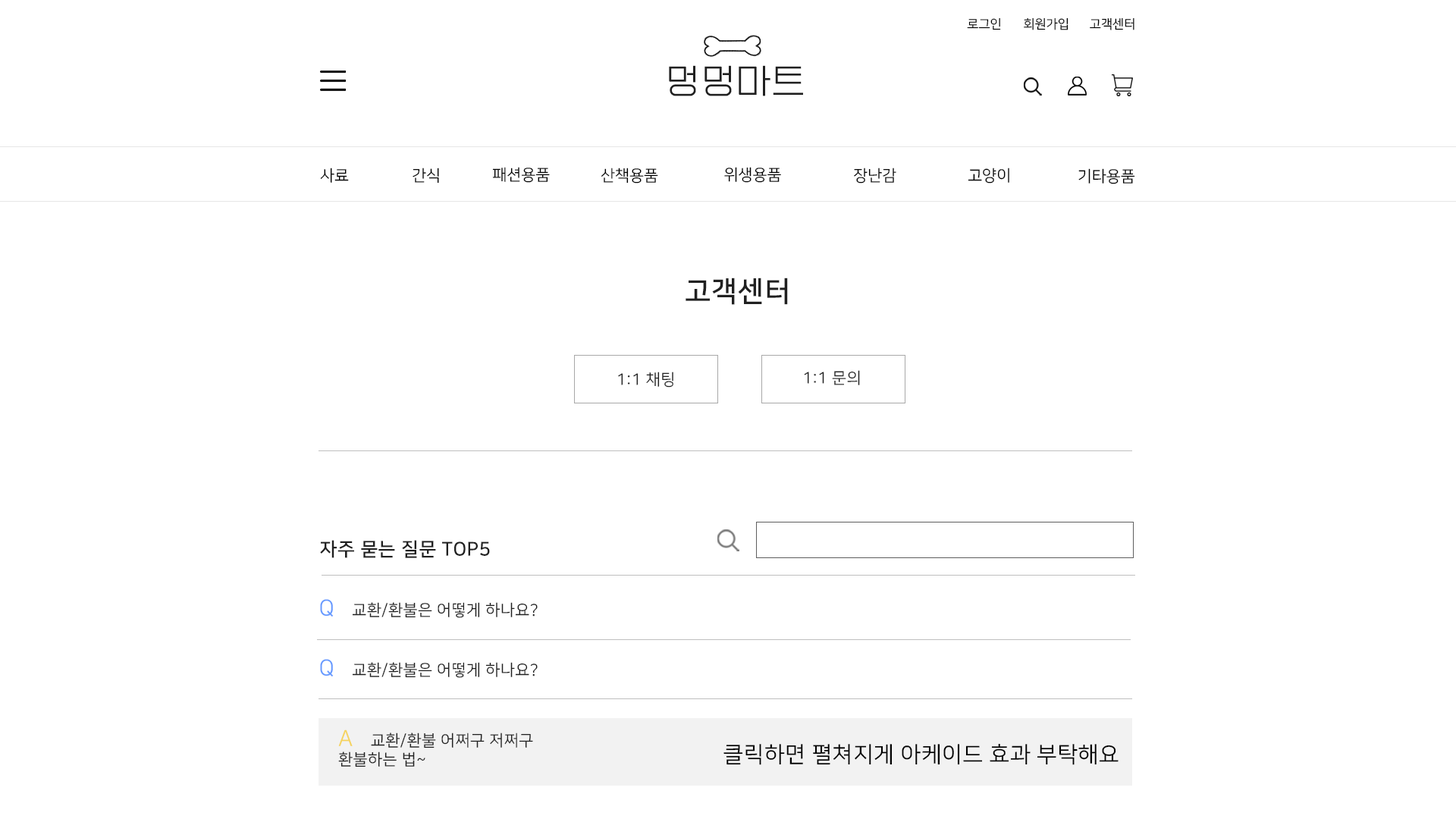
<style>
.page{position:relative;width:1456px;height:819px;background:#ffffff}
.page>*{position:absolute;margin:0}
.t1{font:12.6px "NanumSquareR";color:#000000}
.t2{font:34.8px "EF_watermelonSalad";letter-spacing:0.025em;color:#202020}
.t3{font:15.8px "NanumSquareR";color:#000000}
.t4{font:28.4px "NanumSquareB";letter-spacing:0.025em;color:#202020}
.t5{font:15.8px "NanumSquareR";letter-spacing:0.025em;color:#202020}
.t6{font:19px "NanumSquareB";letter-spacing:0.025em;color:#202020}
.t7{font:22.1px "NanumSquareR";letter-spacing:0.025em;color:#669aff}
.t8{font:22.1px "NanumSquareR";letter-spacing:0.025em;color:#f5d35d}
.t9{font:22.1px "NanumSquareR";letter-spacing:0.025em;color:#000000}
</style>
<div class="page">
<p class="t1" style="left:967px;top:17px;width:34px;height:13px">로그인</p>
<p class="t1" style="left:1024px;top:17px;width:44px;height:13px">회원가입</p>
<p class="t1" style="left:1090px;top:17px;width:44px;height:13px">고객센터</p>
<p class="t2" style="left:669px;top:65px;width:134px;height:31px">멍멍마트</p>
<p class="t3" style="left:320px;top:168px;width:29px;height:15px">사료</p>
<p class="t3" style="left:413px;top:168px;width:26px;height:16px">간식</p>
<p class="t3" style="left:492px;top:167px;width:58px;height:16px">패션용품</p>
<p class="t3" style="left:601px;top:168px;width:57px;height:16px">산책용품</p>
<p class="t3" style="left:724px;top:167px;width:57px;height:16px">위생용품</p>
<p class="t3" style="left:854px;top:168px;width:42px;height:16px">장난감</p>
<p class="t3" style="left:968px;top:168px;width:41px;height:16px">고양이</p>
<p class="t3" style="left:1078px;top:168px;width:57px;height:16px">기타용품</p>
<p class="t4" style="left:686px;top:278px;width:102px;height:27px">고객센터</p>
<p class="t5" style="left:618px;top:372px;width:55px;height:16px">1:1 채팅</p>
<p class="t5" style="left:804px;top:370px;width:56px;height:15px">1:1 문의</p>
<p class="t6" style="left:320px;top:540px;width:170px;height:18px">자주 묻는 질문 TOP5</p>
<p class="t5" style="left:320px;top:599px;width:218px;height:19px"><span class="t7">Q</span>    교환/환불은 어떻게 하나요?</p>
<p class="t5" style="left:320px;top:659px;width:218px;height:19px"><span class="t7">Q</span>    교환/환불은 어떻게 하나요?</p>
<p class="t5" style="left:338px;top:730px;width:195px;height:37px"><span class="t8">A</span>    교환/환불 어쩌구 저쩌구<br>환불하는 법~</p>
<p class="t9" style="left:723px;top:743px;width:396px;height:22px">클릭하면 펼쳐지게 아케이드 효과 부탁해요</p>
</div>
